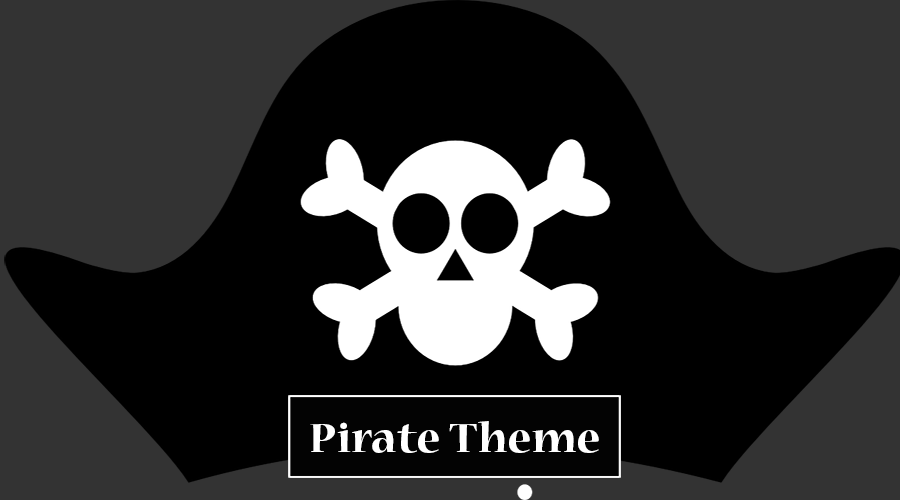
<style>
.page{position:relative;width:900px;height:500px;background:#333333}
.page>*{position:absolute;margin:0}
.t1{font:45.7px "NuevaStd-Bold";color:#ffffff;scale:1.06 1}
</style>
<div class="page">
<p class="t1" style="left:310px;top:421px;width:289px;height:32px">Pirate Theme</p>
</div>
